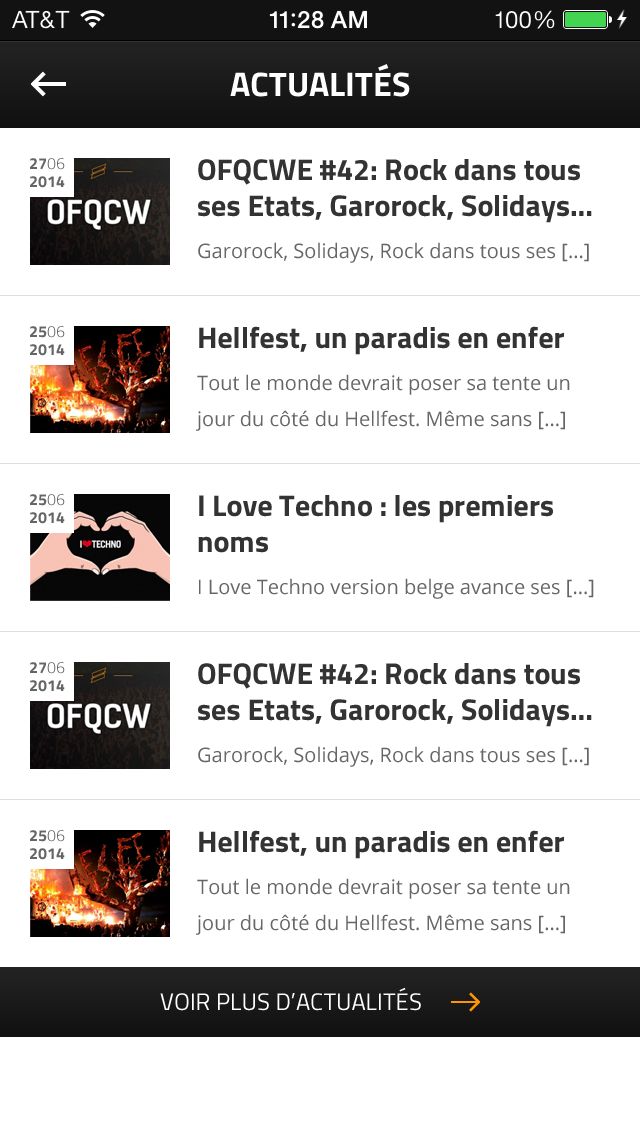
<style>
.page{position:relative;width:640px;height:1136px;background:#ffffff}
.page>*{position:absolute;margin:0}
.t1{font:34px "Titillium-Bold";color:#ffffff;text-transform:uppercase}
.t2{font:16px/18px "Titillium-Bold";color:#666666;text-transform:uppercase}
.t3{font:16px/18px "Titillium-Light";color:#666666;text-transform:uppercase}
.t4{font:30px/36px "Titillium-Bold";color:#333333}
.t5{font:20px/42px "OpenSans";color:#666666}
.t6{font:20px/36px "OpenSans";color:#666666}
.t7{font:20px/30px "OpenSans";color:#666666}
.t8{font:24px "Titillium-Regular";color:#ffffff;text-transform:uppercase}
</style>
<div class="page">
<p class="t1" style="left:230px;top:64px;width:180px;height:33px">actualités</p>
<p class="t2" style="left:30px;top:158px;width:35px;height:30px">27<span class="t3">06<br></span>2014</p>
<p class="t4" style="left:198px;top:159px;width:394px;height:104px">OFQCWE #42: Rock dans tous ses Etats, Garorock, Solidays…<br><span class="t5">Garorock, Solidays, Rock dans tous ses [...]</span></p>
<p class="t2" style="left:30px;top:326px;width:35px;height:30px">25<span class="t3">06<br></span>2014</p>
<p class="t6" style="left:196px;top:326px;width:374px;height:105px"><span class="t4">Hellfest, un paradis en enfer<br></span><span class="t5">Tout </span>le monde devrait poser sa tente un jour du côté du Hellfest. Même sans [...]</p>
<p class="t2" style="left:30px;top:494px;width:35px;height:30px">25<span class="t3">06<br></span>2014</p>
<p class="t5" style="left:198px;top:495px;width:396px;height:104px"><span class="t4">I Love Techno : les premiers noms<br></span>I Love Techno version belge avance ses<span class="t7"> [...]</span></p>
<p class="t2" style="left:30px;top:662px;width:35px;height:30px">27<span class="t3">06<br></span>2014</p>
<p class="t4" style="left:198px;top:663px;width:394px;height:104px">OFQCWE #42: Rock dans tous ses Etats, Garorock, Solidays…<br><span class="t5">Garorock, Solidays, Rock dans tous ses [...]</span></p>
<p class="t2" style="left:30px;top:830px;width:35px;height:30px">25<span class="t3">06<br></span>2014</p>
<p class="t6" style="left:196px;top:830px;width:374px;height:105px"><span class="t4">Hellfest, un paradis en enfer<br></span><span class="t5">Tout </span>le monde devrait poser sa tente un jour du côté du Hellfest. Même sans [...]</p>
<p class="t8" style="left:160px;top:987px;width:261px;height:24px">voir plus d’actualités</p>
</div>
